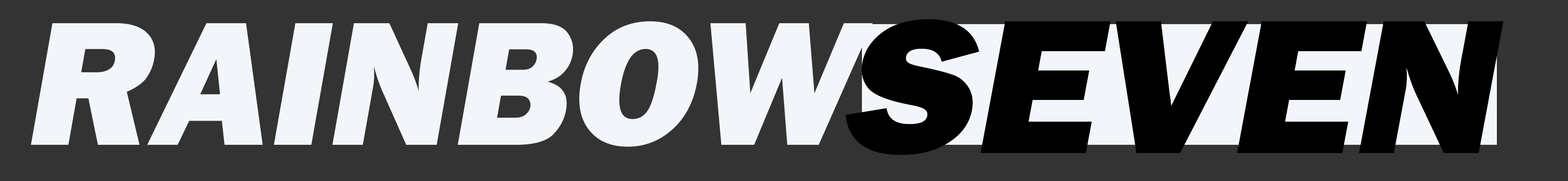
<style>
.page{position:relative;width:1568px;height:181px;background:#333333}
.page>*{position:absolute;margin:0}
.t1{font:182.8px "FranklinGothic-Heavy";color:#f2f6fa;font-style:italic}
.t2{font:198.6px "FranklinGothic-Heavy";color:#000000;font-style:italic;scale:1.06 1}
</style>
<div class="page">
<p class="t1" style="left:30px;top:21px;width:843px;height:126px">RAINBOW</p>
<p class="t2" style="left:845px;top:19px;width:659px;height:136px">SEVEN</p>
</div>
